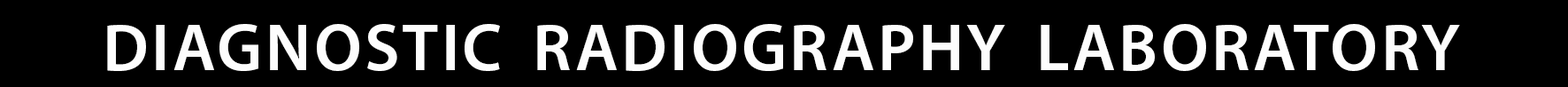
<style>
.page{position:relative;width:1568px;height:87px;background:#000000}
.page>*{position:absolute;margin:0}
.t1{font:67.6px "MyriadPro-Semibold";letter-spacing:0.045em;color:#fdfdfd}
</style>
<div class="page">
<p class="t1" style="left:107px;top:24px;width:1353px;height:47px">DIAGNOSTIC  RADIOGRAPHY  LABORATORY</p>
</div>
